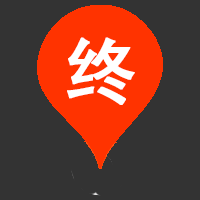
<style>
.page{position:relative;width:200px;height:200px;background:#333333}
.page>*{position:absolute;margin:0}
.t1{font:72px "AdobeHeitiStd-Regular";color:#ffffff;font-weight:bold}
</style>
<div class="page">
<p class="t1" style="left:67px;top:37px;width:68px;height:68px">终</p>
</div>
